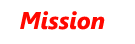
<style>
.page{position:relative;width:135px;height:44px;background:#ffffff}
.page>*{position:absolute;margin:0}
.t1{font:24px "SegoeUI-BoldItalic";color:#ff0800}
</style>
<div class="page">
<p class="t1" style="left:20px;top:11px;width:85px;height:19px">Mission</p>
</div>
